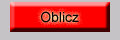
<style>
.page{position:relative;width:120px;height:40px;background:#c6c3c6}
.page>*{position:absolute;margin:0}
.t1{font:14px "ArialMT";color:#000000}
</style>
<div class="page">
<p class="t1" style="left:41px;top:11px;width:38px;height:12px">Oblicz</p>
</div>
